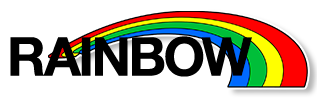
<style>
.page{position:relative;width:317px;height:100px;background:#ffffff}
.page>*{position:absolute;margin:0}
.t1{font:92px "HelveticaNeueCE-Bold";letter-spacing:-0.05em;color:#000000}
</style>
<div class="page">
<p class="t1" style="left:10px;top:36px;width:242px;height:41px">RAINBOW</p>
</div>
